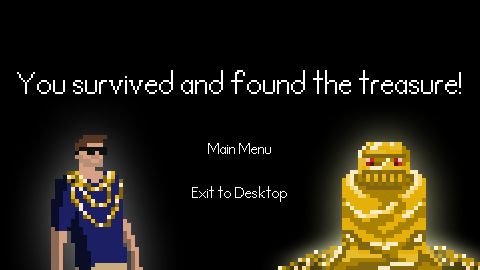
<style>
.page{position:relative;width:480px;height:270px;background:#000000}
.page>*{position:absolute;margin:0}
.t1{font:32px "Unexplored";color:#ffffff}
.t2{font:16px "Unexplored";color:#ffffff}
</style>
<div class="page">
<p class="t1" style="left:17px;top:70px;width:444px;height:24px">You survived and found the treasure!</p>
<p class="t2" style="left:208px;top:143px;width:63px;height:11px">Main Menu</p>
<p class="t2" style="left:192px;top:186px;width:95px;height:16px">Exit to Desktop</p>
</div>
